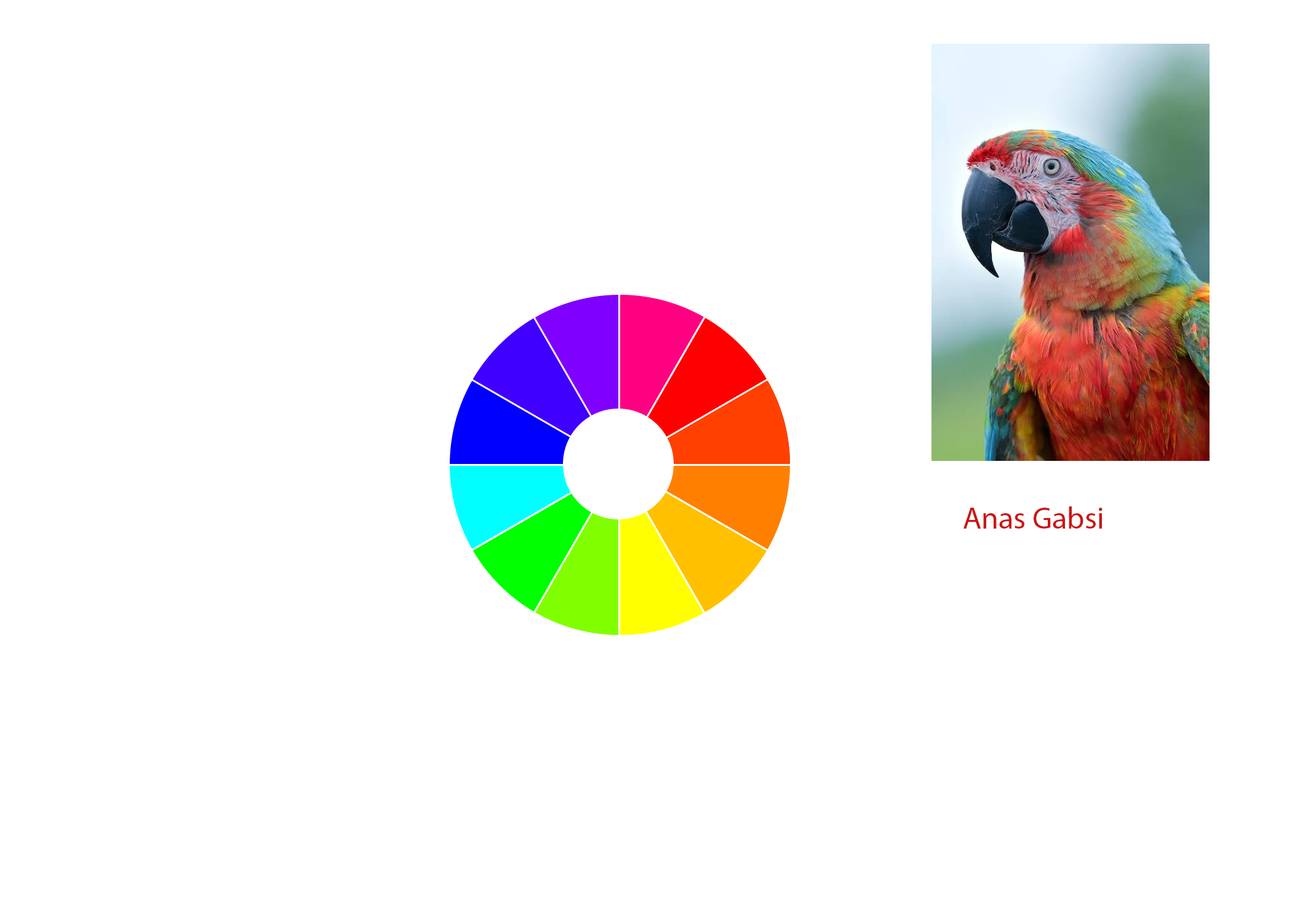
<style>
.page{position:relative;width:1292px;height:923px;background:#ffffff}
.page>*{position:absolute;margin:0}
.t1{font:30.8px "MyriadPro-Regular";color:#cc1414}
</style>
<div class="page">
<p class="t1" style="left:964px;top:506px;width:139px;height:23px">Anas Gabsi</p>
</div>
